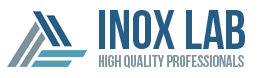
<style>
.page{position:relative;width:261px;height:78px;background:#ffffff}
.page>*{position:absolute;margin:0}
.t1{font:54.5px "BebasNeue";color:#275d84}
.t2{font:16.2px "BebasNeue";color:#7d939e}
</style>
<div class="page">
<p class="t1" style="left:99px;top:10px;width:146px;height:39px">INOX Lab</p>
<p class="t2" style="left:99px;top:55px;width:145px;height:13px">High quality professionals</p>
</div>
